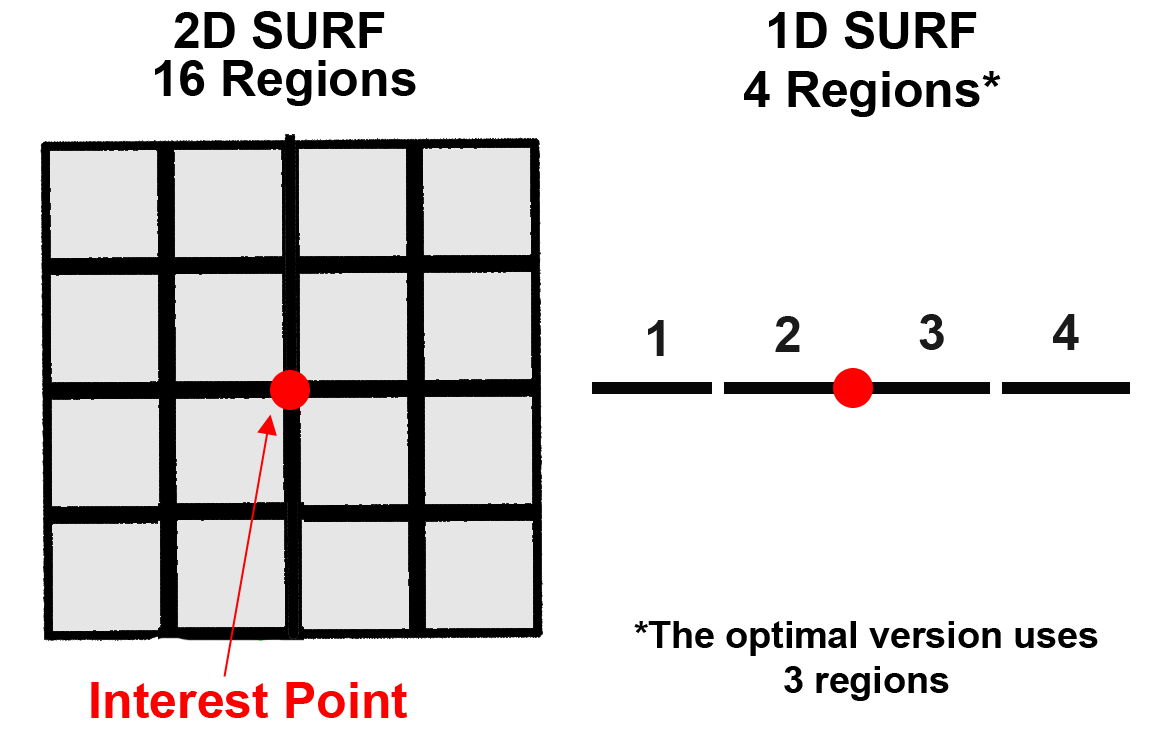
<style>
.page{position:relative;width:1162px;height:742px;background:#ffffff}
.page>*{position:absolute;margin:0}
.t1{font:50px "Arial-BoldMT";color:#000000}
.t2{font:50px "Arial-BoldMT";color:#1a1a1a}
.t3{font:37.5px "Arial-BoldMT";color:#000000}
.t4{font:50px "Arial-BoldMT";color:#fc0000}
</style>
<div class="page">
<p class="t1" style="left:174px;top:11px;width:211px;height:38px">2D SURF</p>
<p class="t1" style="left:769px;top:11px;width:208px;height:38px">1D SURF</p>
<p class="t1" style="left:155px;top:60px;width:261px;height:46px">16 Regions</p>
<p class="t1" style="left:744px;top:71px;width:257px;height:46px">4 Regions*</p>
<p class="t2" style="left:775px;top:316px;width:25px;height:36px">2</p>
<p class="t2" style="left:919px;top:314px;width:25px;height:36px">3</p>
<p class="t2" style="left:1053px;top:314px;width:26px;height:36px">4</p>
<p class="t2" style="left:648px;top:320px;width:16px;height:36px">1</p>
<p class="t3" style="left:634px;top:621px;width:464px;height:80px;text-align:center">*The optimal version uses<br>3 regions</p>
<p class="t4" style="left:91px;top:682px;width:316px;height:36px">Interest Point</p>
</div>
